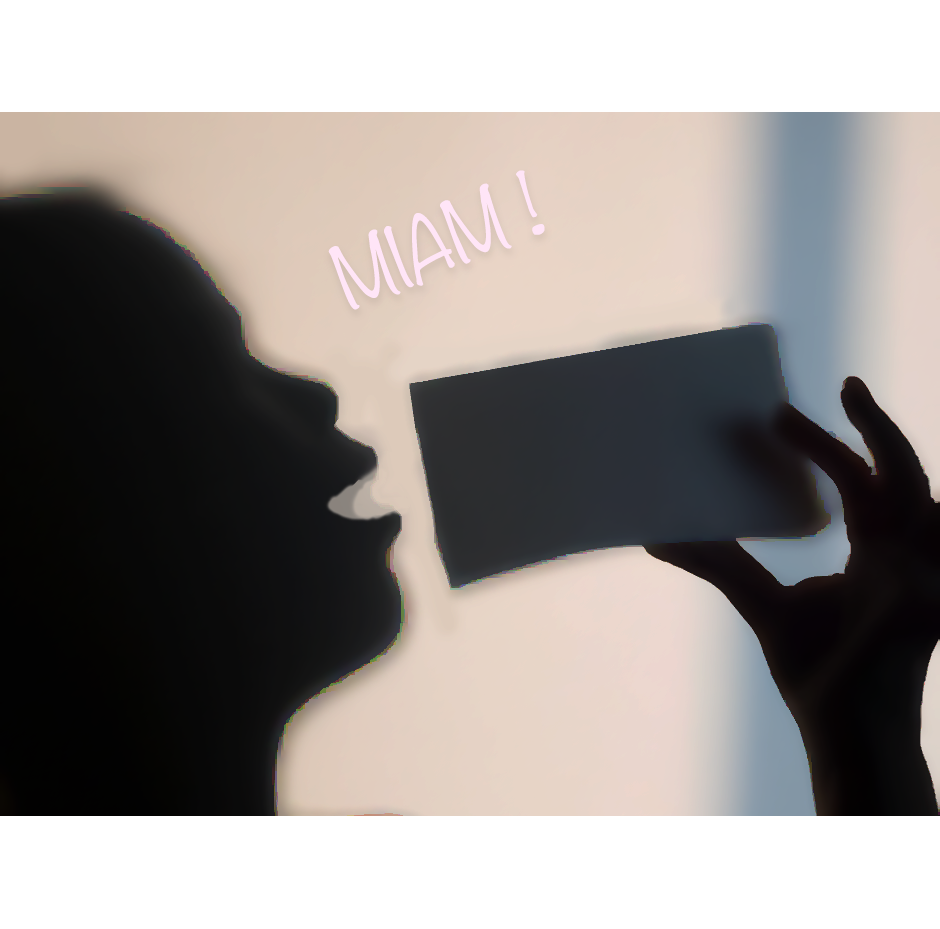
<style>
.page{position:relative;width:940px;height:929px;background:#ffffff}
.page>*{position:absolute;margin:0}
.t1{font:77.3px "Noteworthy-Light";color:#ffe5f7;scale:0.94 1}
</style>
<div class="page">
<p class="t1" style="left:328px;top:170px;width:217px;height:140px;rotate:-22deg">MIAM !</p>
</div>
